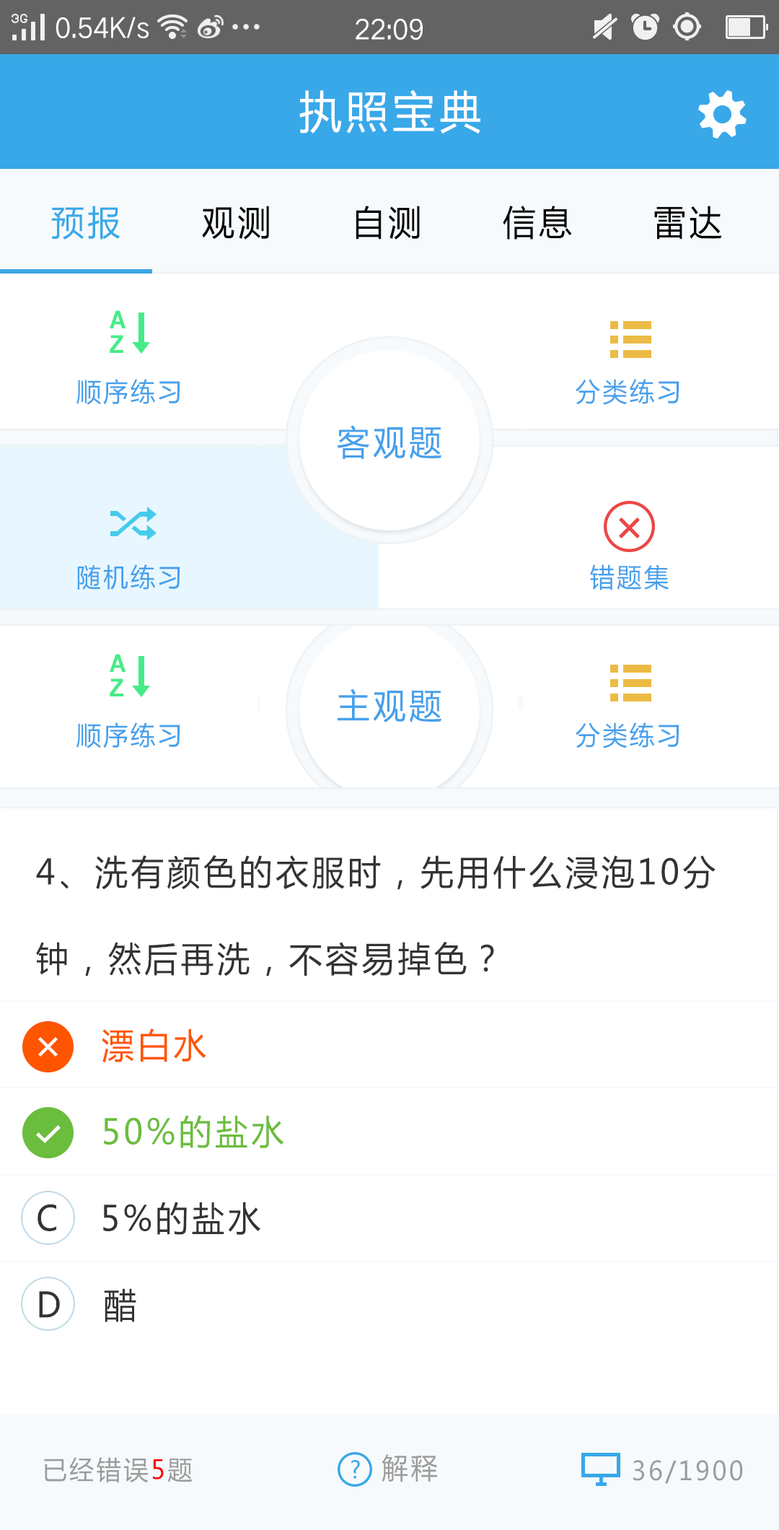
<style>
.page{position:relative;width:779px;height:1530px;background:#ffffff}
.page>*{position:absolute;margin:0}
.t1{font:44.7px "MicrosoftYaHei";letter-spacing:0.1em;color:#ffffff;scale:0.95 1}
.t2{font:34.6px "MicrosoftYaHei";letter-spacing:0.1em;color:#000000;scale:0.95 1}
.t3{font:34.6px "MicrosoftYaHei";letter-spacing:0.1em;color:#39a8e8;scale:0.95 1}
.t4{font:24.5px/24.5px "Arial-BoldMT";letter-spacing:0.1em;color:#46ec88;scale:0.95 1}
.t5{font:26px "MicrosoftYaHei";letter-spacing:0.1em;color:#46a0ec;scale:0.95 1}
.t6{font:34.6px "MicrosoftYaHei";letter-spacing:0.1em;color:#46a0ec;scale:0.95 1}
.t7{font:34.6px/86.6px "MicrosoftYaHei";letter-spacing:0.1em;color:#333333;scale:0.95 1}
.t8{font:34.6px/86.6px "MicrosoftYaHei";letter-spacing:0.1em;color:#ff5500;scale:0.95 1}
.t9{font:34.6px/86.6px "MicrosoftYaHei";letter-spacing:0.1em;color:#6bbd3d;scale:0.95 1}
.t10{font:26px "MicrosoftYaHei";letter-spacing:0.1em;color:#9c9c9c;scale:0.95 1}
.t11{font:26px "MicrosoftYaHei";letter-spacing:0.1em;color:#ff0000;scale:0.95 1}
.t12{font:28.5px "MicrosoftYaHei";letter-spacing:0.1em;color:#9c9c9c;scale:0.93 1}
.t13{font:23.7px "MicrosoftYaHei";letter-spacing:0.1em;color:#39a8e8;scale:0.95 1}
</style>
<div class="page">
<p class="t1" style="left:299px;top:89px;width:182px;height:45px">执照宝典</p>
<p class="t2" style="left:51px;top:206px;width:671px;height:34px"><span class="t3">预报</span>      观测      自测      信息      雷达</p>
<p class="t4" style="left:110px;top:310px;width:16px;height:43px">A<br>Z</p>
<p class="t5" style="left:76px;top:379px;width:104px;height:26px">顺序练习</p>
<p class="t5" style="left:576px;top:379px;width:104px;height:26px">分类练习</p>
<p class="t6" style="left:337px;top:425px;width:105px;height:35px">客观题</p>
<p class="t5" style="left:77px;top:564px;width:103px;height:26px">随机练习</p>
<p class="t5" style="left:590px;top:564px;width:79px;height:26px">错题集</p>
<p class="t4" style="left:110px;top:654px;width:16px;height:42px">A<br>Z</p>
<p class="t6" style="left:338px;top:688px;width:104px;height:35px">主观题</p>
<p class="t5" style="left:76px;top:722px;width:104px;height:26px">顺序练习</p>
<p class="t5" style="left:576px;top:722px;width:104px;height:26px">分类练习</p>
<p class="t7" style="left:36px;top:855px;width:680px;height:467px">4、洗有颜色的衣服时，先用什么浸泡10分钟，然后再洗，不容易掉色？<br>     <span class="t8">漂白水   <br>     </span><span class="t9">50%的盐水  </span> <br>C   5%的盐水  <br>D   醋</p>
<p class="t10" style="left:44px;top:1457px;width:149px;height:26px">已经错误<span class="t11">5</span>题</p>
<p class="t12" style="left:382px;top:1454px;width:55px;height:28px">解释</p>
<p class="t13" style="left:351px;top:1460px;width:9px;height:19px">?</p>
<p class="t10" style="left:634px;top:1460px;width:109px;height:24px">36/1900</p>
</div>
